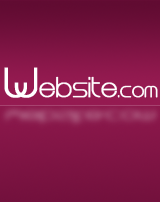
<style>
.page{position:relative;width:160px;height:202px}
.page>*{position:absolute;margin:0}
.t1{font:23.8px "Steiner";color:#ffffff;font-weight:bold}
.t2{font:48px "Steiner";color:#ffffff;font-weight:bold}
.t3{font:18px "Steiner";color:#ffffff;font-weight:bold}
</style>
<div class="page">
<p class="t1" style="left:4px;top:67px;width:154px;height:31px"><span class="t2">w</span>ebsite<span class="t3">.com</span></p>
</div>
